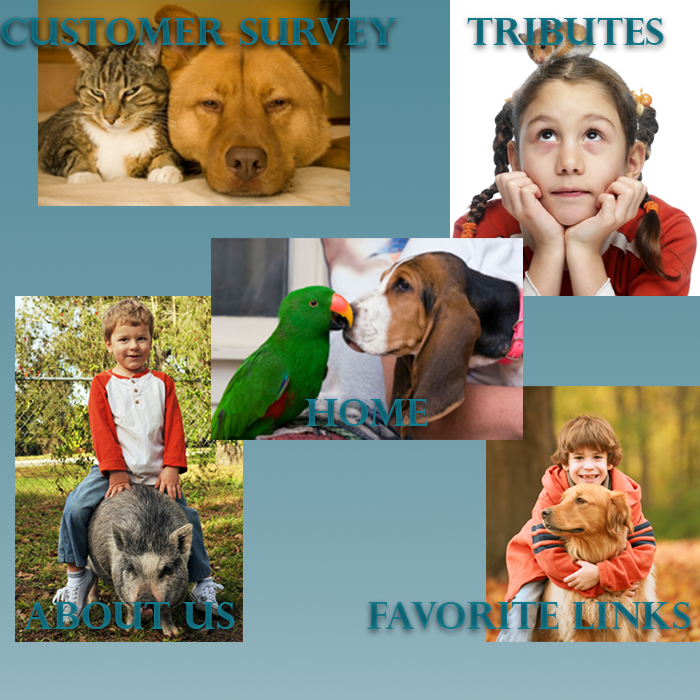
<style>
.page{position:relative;width:700px;height:700px}
.page>*{position:absolute;margin:0}
.t1{font:38px "PerpetuaTitlingMT-Bold";color:#126f7f}
.t2{font:38px "PerpetuaTitlingMT-Bold";color:#126e7e}
.t3{font:38px "PerpetuaTitlingMT-Bold";color:#136f80}
</style>
<div class="page">
<p class="t1" style="left:1px;top:17px;width:397px;height:28px">Customer Survey</p>
<p class="t1" style="left:467px;top:17px;width:197px;height:28px">Tributes</p>
<p class="t1" style="left:305px;top:399px;width:123px;height:27px">Home</p>
<p class="t2" style="left:23px;top:601px;width:212px;height:28px">About Us</p>
<p class="t3" style="left:367px;top:601px;width:324px;height:28px">Favorite Links</p>
</div>
